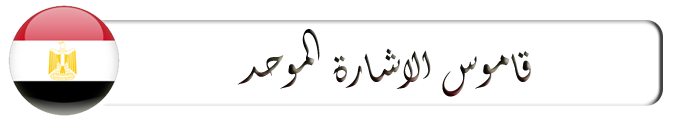
<style>
.page{position:relative;width:699px;height:124px;background:#ffffff}
.page>*{position:absolute;margin:0}
.t1{font:68px "Aldhabi"}
</style>
<div class="page">
<p class="t1" style="left:237px;top:29px;width:294px;height:68px">قاموس الاشارة الموحد</p>
</div>
